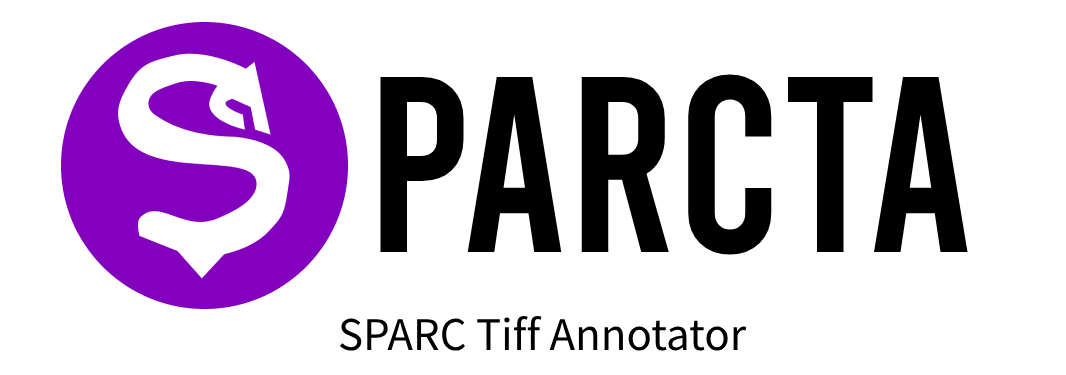
<style>
.page{position:relative;width:1066px;height:375px;background:#ffffff}
.page>*{position:absolute;margin:0}
.t1{font:250px "Bebas-Regular";color:#000000}
.t2{font:47px "SourceSansPro-Regular";color:#000000}
</style>
<div class="page">
<p class="t1" style="left:380px;top:74px;width:588px;height:181px">PARCTA</p>
<p class="t2" style="left:339px;top:315px;width:408px;height:36px">SPARC Tiff Annotator</p>
</div>
